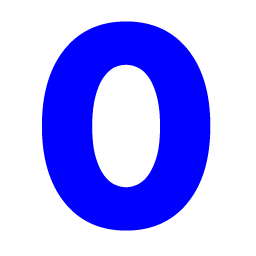
<style>
.page{position:relative;width:256px;height:256px;background:#ffffff}
.page>*{position:absolute;margin:0}
.t1{font:267.3px "Tahoma-Bold";color:#0000ff;text-transform:uppercase;font-weight:bold;scale:0.86 1}
</style>
<div class="page">
<p class="t1" style="left:42px;top:21px;width:169px;height:210px">O</p>
</div>
